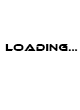
<style>
.page{position:relative;width:80px;height:110px;background:#ffffff}
.page>*{position:absolute;margin:0}
.t1{font:10.5px "EthnocentricRg-Regular";color:#000000}
</style>
<div class="page">
<p class="t1" style="left:5px;top:44px;width:73px;height:7px">Loading...</p>
</div>
